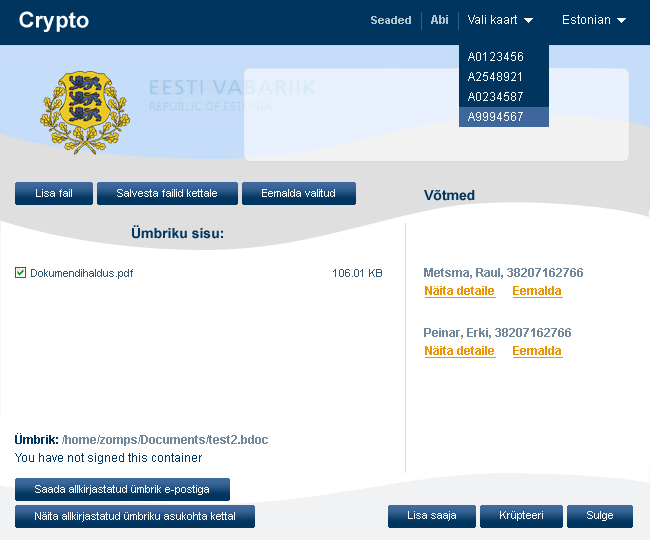
<style>
.page{position:relative;width:650px;height:540px;background:#ffffff}
.page>*{position:absolute;margin:0}
.t1{font:11px "Arial-BoldMT";color:#afc6d1}
.t2{font:12px "Arial-BoldMT";color:#afc6d1}
.t3{font:12px "ArialMT";color:#ffffff}
.t4{font:12px/20px "ArialMT";color:#ffffff}
.t5{font:11px "ArialMT";color:#ffffff}
.t6{font:14px "Arial-BoldMT";color:#00355f}
.t7{font:11px "ArialMT";color:#355670}
.t8{font:12px "Arial-BoldMT";color:#71889b}
.t9{font:12px "Arial-BoldMT";color:#e99401;text-decoration:underline}
.t10{font:12px/18px "ArialMT";color:#00355f}
.t11{font:12px/18px "Arial-BoldMT";color:#00355f}
.t12{font:12px/18px "Arial-BoldMT";color:#71889b}
</style>
<div class="page">
<p class="t1" style="left:371px;top:16px;width:40px;height:8px">Seaded</p>
<p class="t2" style="left:431px;top:15px;width:17px;height:9px">Abi</p>
<p class="t3" style="left:468px;top:15px;width:49px;height:9px">Vali kaart</p>
<p class="t3" style="left:563px;top:15px;width:47px;height:9px">Estonian</p>
<p class="t4" style="left:468px;top:52px;width:55px;height:69px">A0123456<br>A2548921<br>A0234587<br>A9994567</p>
<p class="t5" style="left:36px;top:189px;width:36px;height:8px">Lisa fail</p>
<p class="t5" style="left:117px;top:189px;width:100px;height:8px">Salvesta failid kettale</p>
<p class="t5" style="left:262px;top:189px;width:73px;height:8px">Eemalda valitud</p>
<p class="t6" style="left:424px;top:190px;width:51px;height:11px">Võtmed</p>
<p class="t6" style="left:132px;top:225px;width:91px;height:14px">Ümbriku sisu:</p>
<p class="t7" style="left:31px;top:269px;width:102px;height:10px">Dokumendihaldus.pdf</p>
<p class="t7" style="left:333px;top:269px;width:49px;height:8px">106.01 KB</p>
<p class="t8" style="left:424px;top:268px;width:159px;height:11px">Metsma, Raul, 38207162766</p>
<p class="t9" style="left:425px;top:286px;width:138px;height:12px">Näita detaile      Eemalda</p>
<p class="t8" style="left:424px;top:328px;width:147px;height:11px">Peinar, Erki, 38207162766</p>
<p class="t9" style="left:425px;top:346px;width:138px;height:12px">Näita detaile      Eemalda</p>
<p class="t10" style="left:15px;top:433px;width:253px;height:31px"><span class="t11">Ümbrik: </span><span class="t12">/home/zomps/Documents/test2.bdoc<br></span>You have not signed this container</p>
<p class="t5" style="left:35px;top:485px;width:174px;height:10px">Saada allkirjastatud ümbrik e-postiga</p>
<p class="t5" style="left:35px;top:512px;width:200px;height:10px">Näita allkirjastatud ümbriku asukohta kettal</p>
<p class="t5" style="left:408px;top:511px;width:48px;height:10px">Lisa saaja</p>
<p class="t5" style="left:500px;top:511px;width:43px;height:10px">Krüpteeri</p>
<p class="t5" style="left:587px;top:511px;width:26px;height:10px">Sulge</p>
</div>
